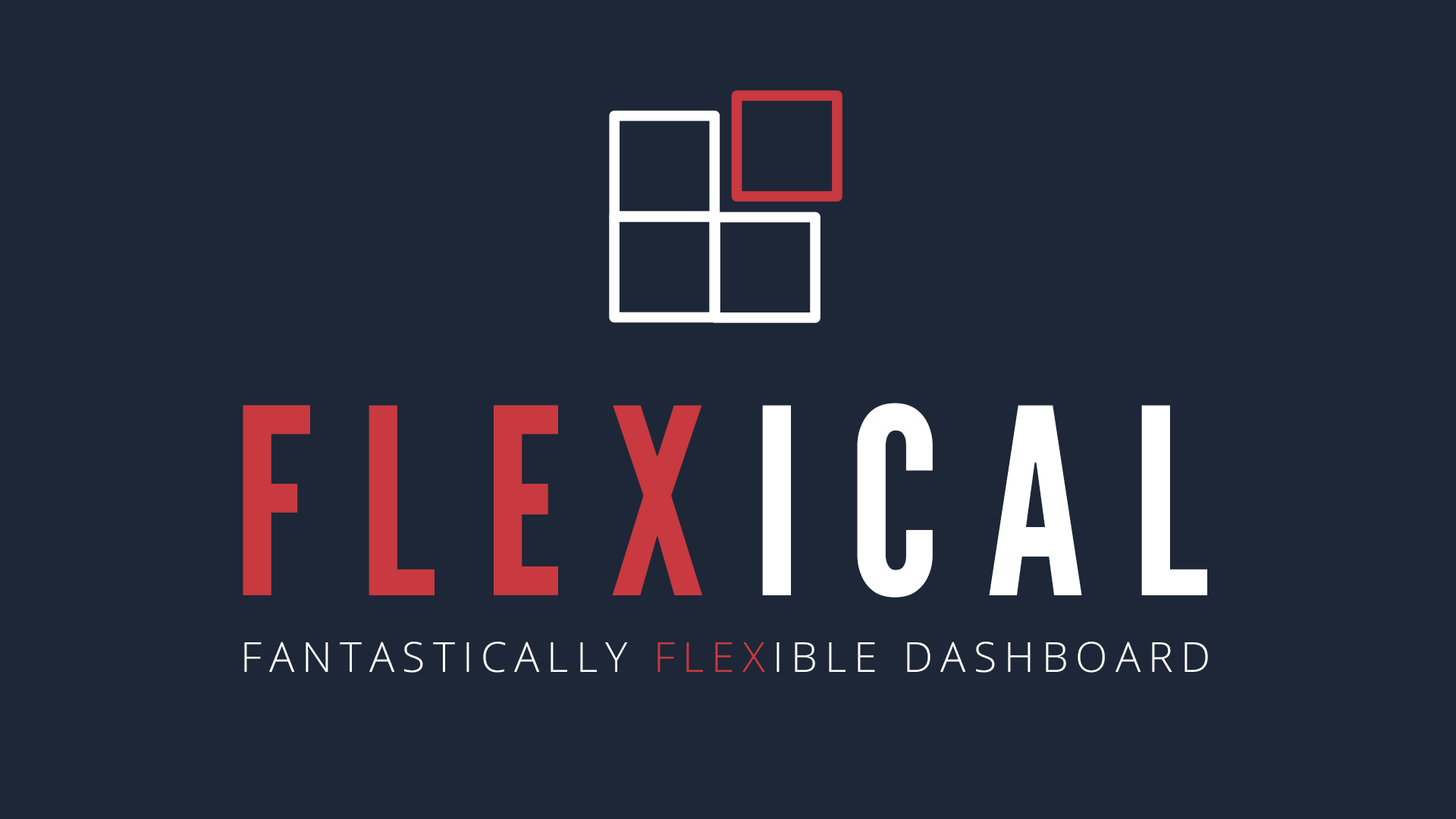
<style>
.page{position:relative;width:1456px;height:819px;background:#1d2737}
.page>*{position:absolute;margin:0}
.t1{font:258.3px "LeagueGothic-Regular";letter-spacing:0.182em;color:#c83940}
.t2{font:258.3px "LeagueGothic-Regular";letter-spacing:0.182em;color:#ffffff}
.t3{font:41.5px "OpenSans-Light";letter-spacing:0.182em;color:#ffffff}
.t4{font:41.5px "OpenSans-Light";letter-spacing:0.182em;color:#c83940}
</style>
<div class="page">
<p class="t1" style="left:243px;top:403px;width:964px;height:195px">FLEX<span class="t2">ICAL</span></p>
<p class="t3" style="left:244px;top:642px;width:964px;height:31px">FANTASTICALLY <span class="t4">FLEX</span>IBLE DASHBOARD</p>
</div>
